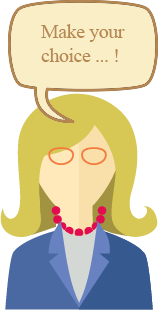
<style>
.page{position:relative;width:158px;height:310px;background:#faeec7}
.page>*{position:absolute;margin:0}
.t1{font:19.9px "TimesNewRomanPSMT";letter-spacing:-0.02em;color:#b68750}
</style>
<div class="page">
<p class="t1" style="left:41px;top:24px;width:84px;height:38px">Make your<br>choice ... !</p>
</div>
